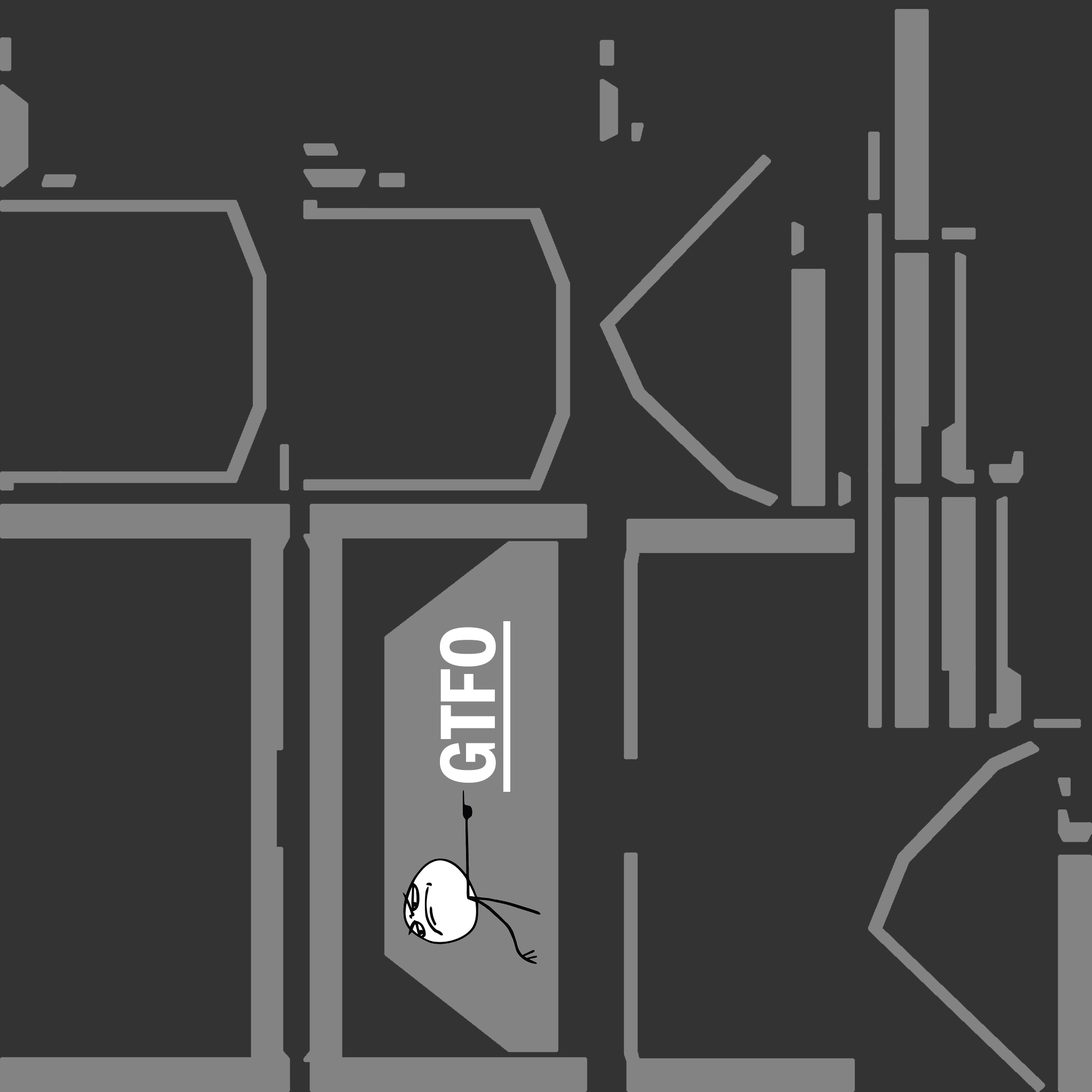
<style>
.page{position:relative;width:1092px;height:1092px;background:#333333}
.page>*{position:absolute;margin:0}
.t1{font:81px "FranklinGothic-DemiCond";color:#ffffff}
</style>
<div class="page">
<p class="t1" style="left:440px;top:627px;width:56px;height:156px;rotate:-90deg">GTFO</p>
</div>
